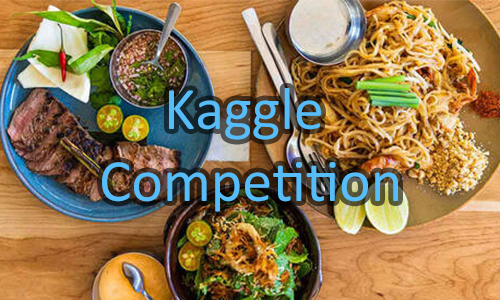
<style>
.page{position:relative;width:500px;height:300px}
.page>*{position:absolute;margin:0}
.t1{font:60px "Calibri";color:#57bdf9}
</style>
<div class="page">
<p class="t1" style="left:102px;top:88px;width:296px;height:124px;text-align:center">Kaggle <br>Competition</p>
</div>
